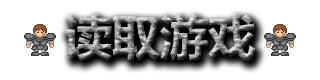
<style>
.page{position:relative;width:320px;height:80px;background:#ffffff}
.page>*{position:absolute;margin:0}
.t1{font:48px "MicrosoftYaHei-Bold"}
</style>
<div class="page">
<p class="t1" style="left:64px;top:14px;width:192px;height:47px">读取游戏</p>
</div>
